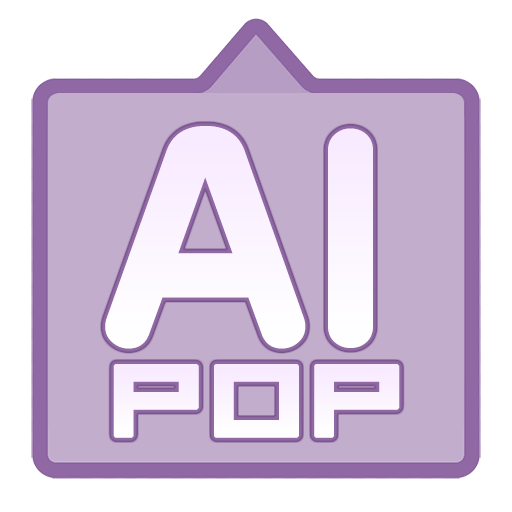
<style>
.page{position:relative;width:512px;height:512px;background:#c2adcd}
.page>*{position:absolute;margin:0}
.t1{font:346.3px "20thCenturyFont";letter-spacing:-0.05em;color:#fcf6ff;font-weight:bold}
.t2{font:83.9px "04b08";color:#fbf2ff;font-weight:bold;scale:1.16 1}
</style>
<div class="page">
<p class="t1" style="left:105px;top:126px;width:268px;height:223px">AI</p>
<p class="t2" style="left:113px;top:364px;width:287px;height:74px">pop</p>
</div>
